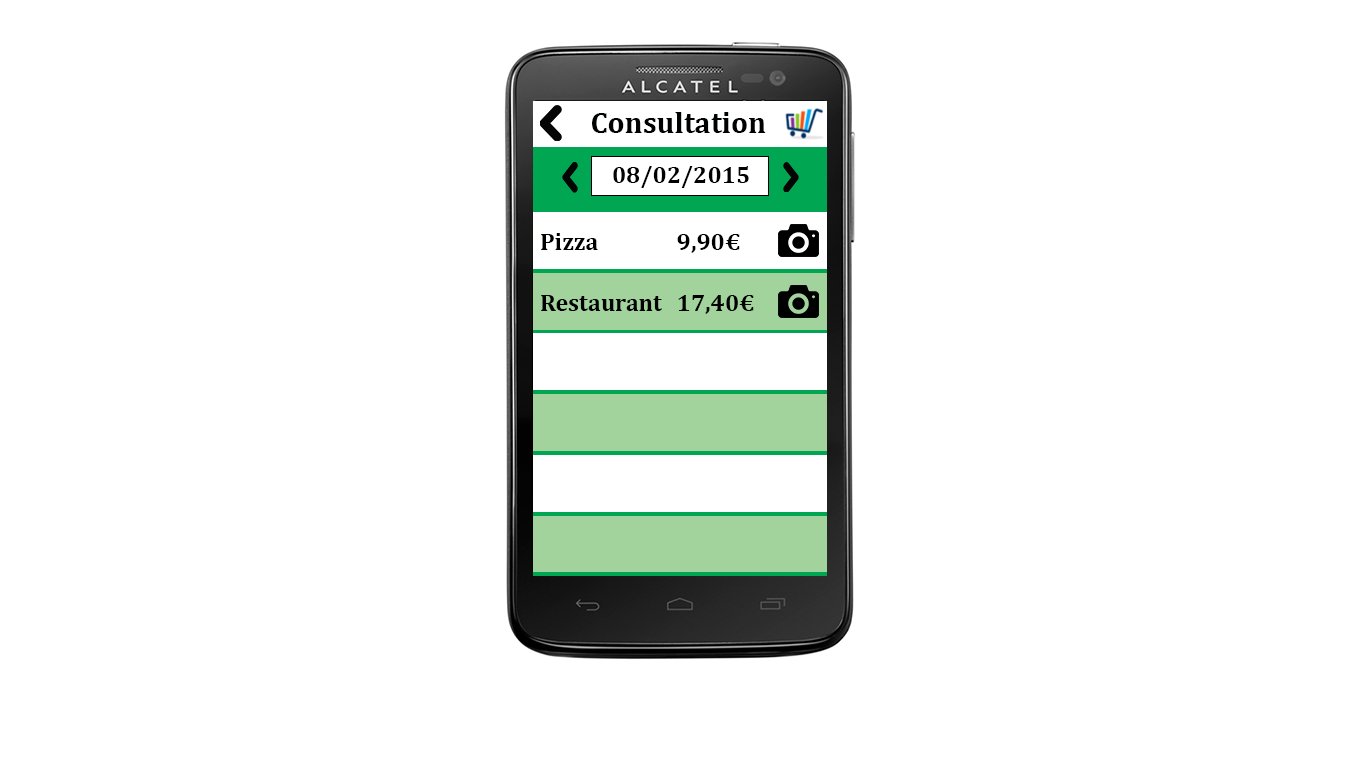
<style>
.page{position:relative;width:1366px;height:768px;background:#ffffff}
.page>*{position:absolute;margin:0}
.t1{font:30px "Cambria-Bold";color:#000101}
.t2{font:24px "Cambria-Bold";color:#000000}
</style>
<div class="page">
<p class="t1" style="left:592px;top:112px;width:174px;height:21px">Consultation</p>
<p class="t2" style="left:613px;top:166px;width:136px;height:22px">08/02/2015</p>
<p class="t2" style="left:541px;top:233px;width:57px;height:17px">Pizza</p>
<p class="t2" style="left:677px;top:234px;width:63px;height:19px">9,90€</p>
<p class="t2" style="left:541px;top:295px;width:121px;height:16px">Restaurant</p>
<p class="t2" style="left:678px;top:295px;width:76px;height:19px">17,40€</p>
</div>
